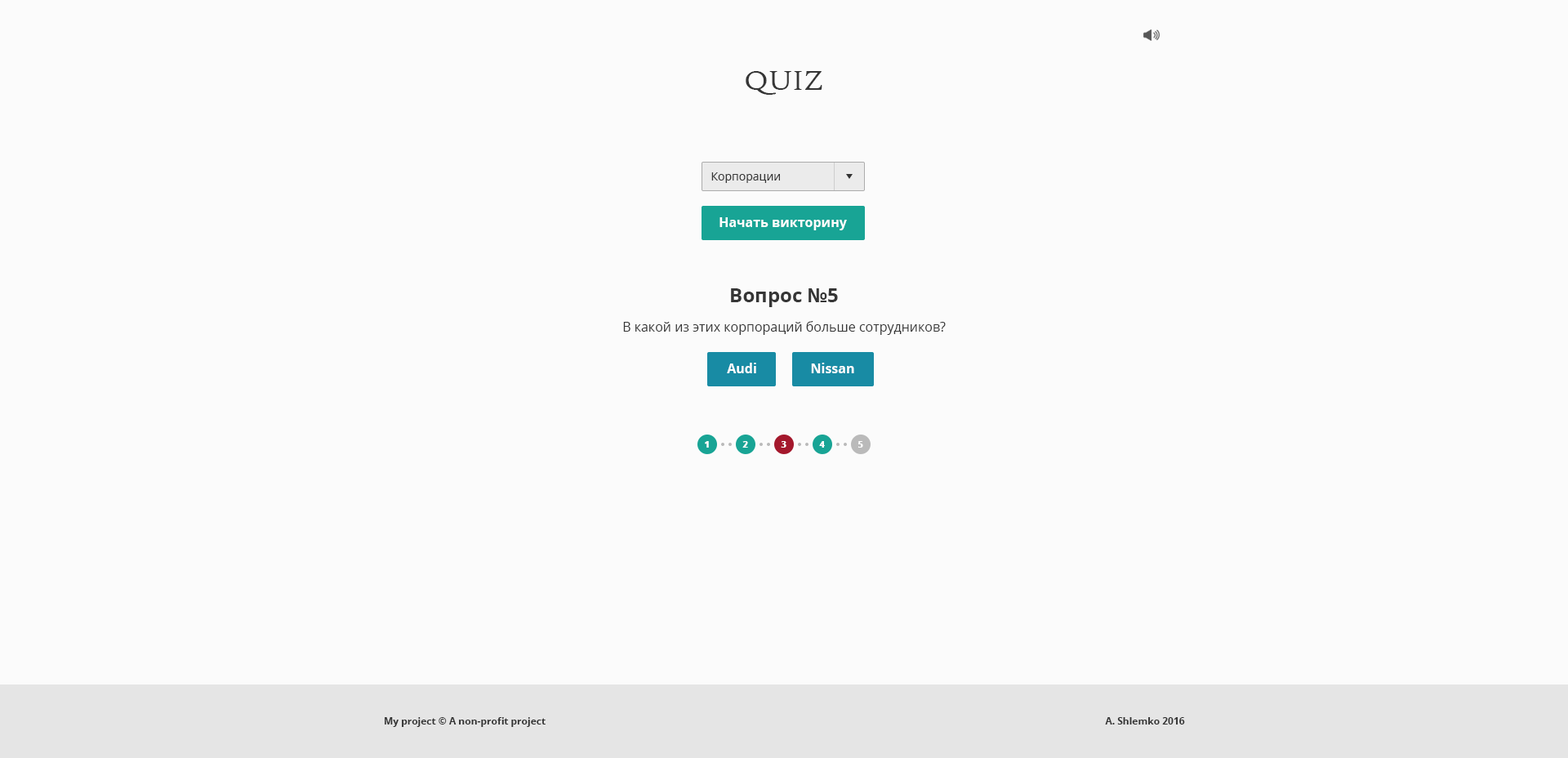
<style>
.page{position:relative;width:1568px;height:758px;background:#fbfbfb}
.page>*{position:absolute;margin:0}
.t1{font:29.4px "HighTowerText-Reg";color:#363636}
.t2{font:11.4px "OpenSans";color:#363636}
.t3{font:13.1px "OpenSans-Bold";color:#ffffff}
.t4{font:13.1px/29.4px "OpenSans";color:#363636}
.t5{font:19.6px/29.4px "OpenSans-Bold";color:#363636}
.t6{font:9px "OpenSans-Extrabold";color:#ffffff}
.t7{font:9.8px "OpenSans-Bold";color:#323232}
</style>
<div class="page">
<p class="t1" style="left:746px;top:71px;width:76px;height:24px">QUIZ</p>
<p class="t2" style="left:711px;top:172px;width:69px;height:11px">Корпорации</p>
<p class="t3" style="left:719px;top:217px;width:128px;height:13px">Начать викторину</p>
<p class="t4" style="left:623px;top:288px;width:323px;height:47px;text-align:center"><span class="t5">Вопрос №5<br></span>В какой из этих корпораций больше сотрудников?</p>
<p class="t3" style="left:727px;top:363px;width:29px;height:10px">Audi</p>
<p class="t3" style="left:811px;top:363px;width:43px;height:10px">Nissan</p>
<p class="t6" style="left:705px;top:441px;width:4px;height:7px">1</p>
<p class="t6" style="left:742px;top:441px;width:6px;height:7px">2</p>
<p class="t6" style="left:781px;top:441px;width:5px;height:7px">3</p>
<p class="t6" style="left:819px;top:441px;width:6px;height:7px">4</p>
<p class="t6" style="left:858px;top:441px;width:5px;height:7px">5</p>
<p class="t7" style="left:385px;top:717px;width:161px;height:10px">My project © A non-profit project</p>
<p class="t7" style="left:1105px;top:717px;width:80px;height:7px">A. Shlemko 2016</p>
</div>
